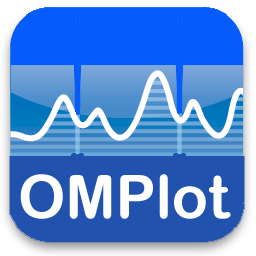
<style>
.page{position:relative;width:256px;height:256px;background:#2052ae}
.page>*{position:absolute;margin:0}
.t1{font:60px "ArialRoundedMTBold";color:#fefefe}
</style>
<div class="page">
<p class="t1" style="left:20px;top:174px;width:211px;height:45px">OMPlot</p>
</div>
